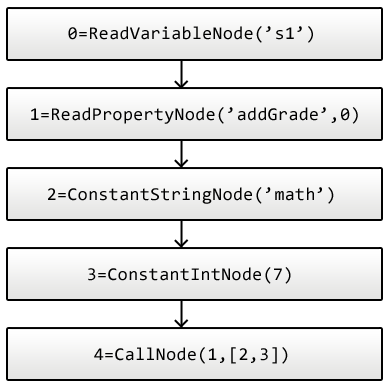
<style>
.page{position:relative;width:387px;height:385px;background:#ffffff}
.page>*{position:absolute;margin:0}
.t1{font:18px "Consolas";letter-spacing:0.025em;color:#000000}
</style>
<div class="page">
<p class="t1" style="left:68px;top:26px;width:245px;height:17px">0=ReadVariableNode(’s1’)</p>
<p class="t1" style="left:31px;top:107px;width:327px;height:17px">1=ReadPropertyNode(’addGrade’,0)</p>
<p class="t1" style="left:48px;top:187px;width:286px;height:17px">2=ConstantStringNode(’math’)</p>
<p class="t1" style="left:88px;top:267px;width:203px;height:17px">3=ConstantIntNode(7)</p>
<p class="t1" style="left:94px;top:347px;width:194px;height:17px">4=CallNode(1,[2,3])</p>
</div>
